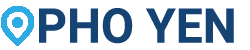
<style>
.page{position:relative;width:250px;height:50px;background:#ffffff}
.page>*{position:absolute;margin:0}
.t1{font:48px "Roboto-Bold";color:#154373}
</style>
<div class="page">
<p class="t1" style="left:39px;top:8px;width:195px;height:36px">PHO YEN</p>
</div>
